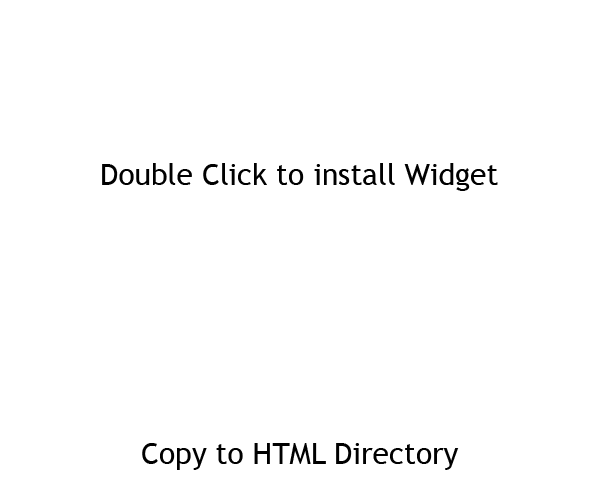
<style>
.page{position:relative;width:600px;height:500px;background:#ffffff}
.page>*{position:absolute;margin:0}
.t1{font:30px "TrebuchetMS";color:#000000}
</style>
<div class="page">
<p class="t1" style="left:102px;top:163px;width:396px;height:28px">Double Click to install Widget</p>
<p class="t1" style="left:142px;top:443px;width:317px;height:27px">Copy to HTML Directory</p>
</div>
